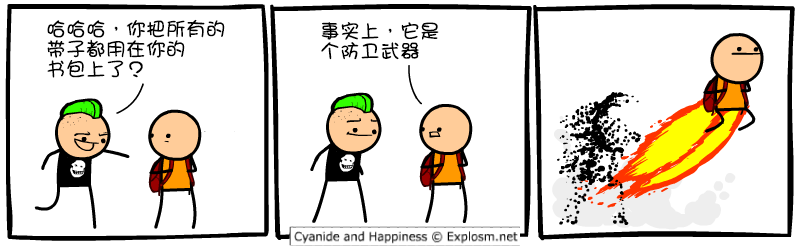
<style>
.page{position:relative;width:800px;height:250px;background:#ffffff}
.page>*{position:absolute;margin:0}
.t1{font:20px/20px "DFGirl";color:#000000}
</style>
<div class="page">
<p class="t1" style="left:47px;top:19px;width:178px;height:59px">哈哈哈，你把所有的<br>带子都用在你的<br>书包上了？</p>
<p class="t1" style="left:321px;top:22px;width:118px;height:38px">事实上，它是<br>个防卫武器</p>
</div>
